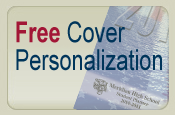
<style>
.page{position:relative;width:175px;height:115px}
.page>*{position:absolute;margin:0}
.t1{font:29px/27.9px "ArialMT";color:#00355a;scale:0.75 1}
.t2{font:29px/27.9px "Arial-BoldMT";color:#a21636;scale:0.75 1}
</style>
<div class="page">
<p class="t1" style="left:16px;top:21px;width:146px;height:50px"><span class="t2">Free</span> Cover<br>Personalization</p>
</div>
